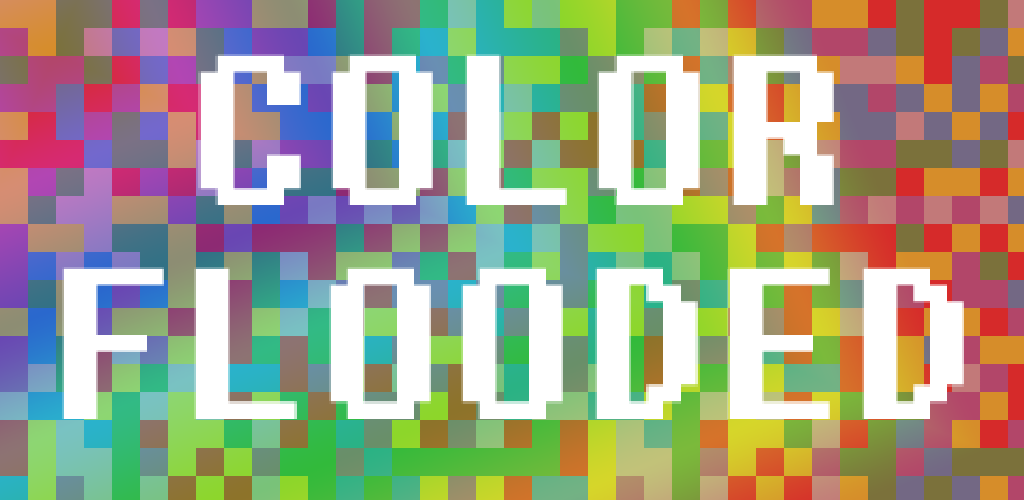
<style>
.page{position:relative;width:1024px;height:500px}
.page>*{position:absolute;margin:0}
.t1{font:213.4px "Fixedsys";color:#ffffff}
</style>
<div class="page">
<p class="t1" style="left:198px;top:54px;width:636px;height:151px">COLOR</p>
<p class="t1" style="left:62px;top:267px;width:902px;height:152px">FLOODED</p>
</div>
